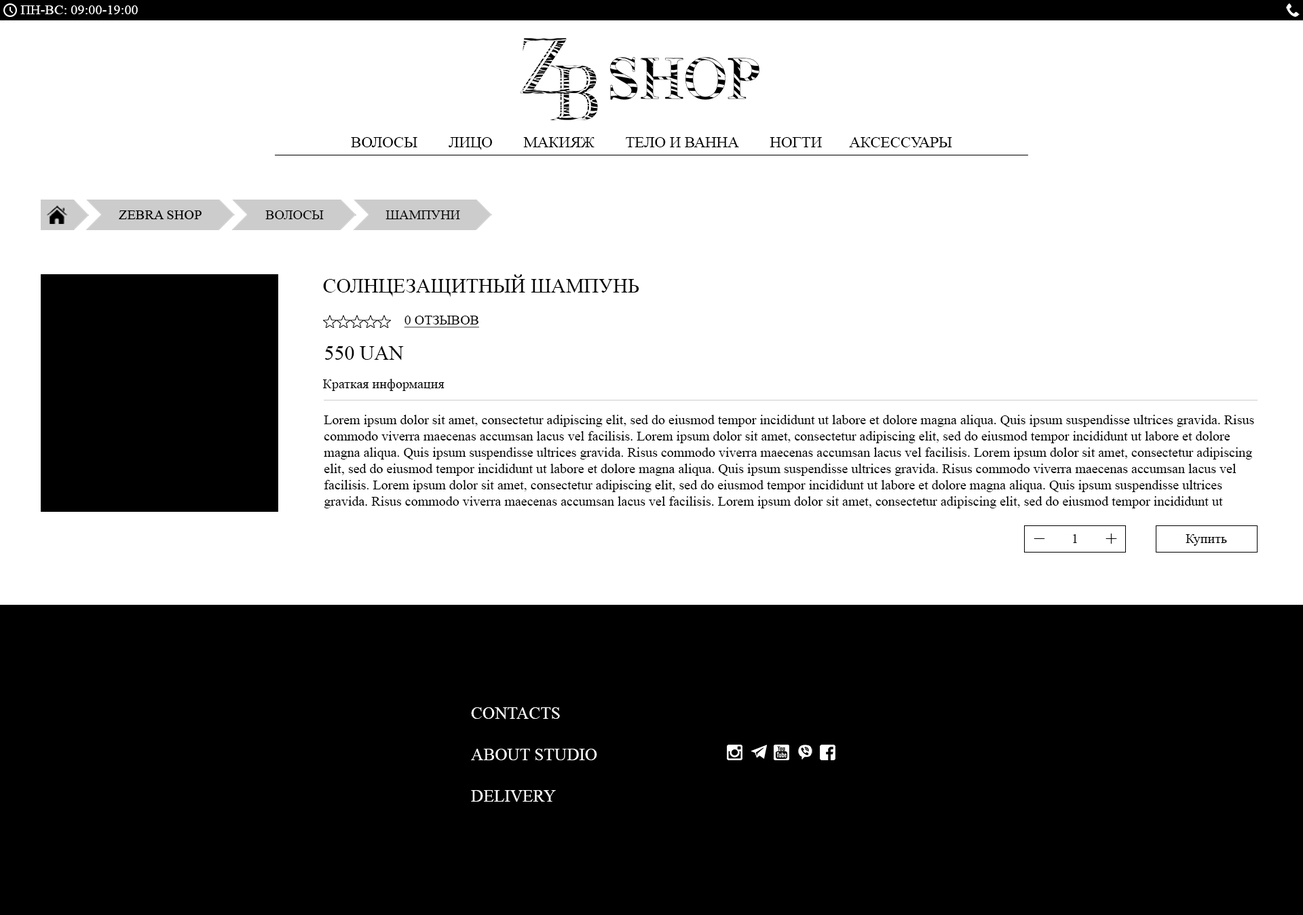
<style>
.page{position:relative;width:1303px;height:915px;background:#ffffff}
.page>*{position:absolute;margin:0}
.t1{font:13.8px "TimesNewRomanPSMT";color:#ffffff}
.t2{font:15.5px "TimesNewRomanPSMT";color:#000000;text-transform:uppercase}
.t3{font:13.6px "TimesNewRomanPSMT";color:#000000;text-transform:uppercase}
.t4{font:20.4px "TimesNewRomanPSMT";color:#000000;text-transform:uppercase}
.t5{font:13.6px "TimesNewRomanPSMT";color:#000000;text-transform:uppercase;text-decoration:underline}
.t6{font:13.6px "TimesNewRomanPSMT";color:#000000}
.t7{font:20.4px "TimesNewRomanPSMT";color:#000000}
.t8{font:17.2px "TimesNewRomanPSMT";color:#ffffff;text-transform:uppercase}
</style>
<div class="page">
<p class="t1" style="left:20px;top:5px;width:118px;height:9px">ПН-ВС: 09:00-19:00</p>
<p class="t2" style="left:351px;top:137px;width:601px;height:13px">волосы        лицо        макияж        Тело и ванна        ногти       аксессуары</p>
<p class="t3" style="left:265px;top:210px;width:59px;height:9px">волосы</p>
<p class="t3" style="left:386px;top:210px;width:74px;height:9px">шампуни</p>
<p class="t4" style="left:323px;top:274px;width:316px;height:23px">солнцезащитный шампунь</p>
<p class="t5" style="left:404px;top:316px;width:75px;height:12px">0 отзывов</p>
<p class="t4" style="left:325px;top:346px;width:79px;height:14px">550 UAN</p>
<p class="t6" style="left:322px;top:379px;width:123px;height:12px">Краткая информация</p>
<p class="t6" style="left:324px;top:415px;width:930px;height:93px">Lorem ipsum dolor sit amet, consectetur adipiscing elit, sed do eiusmod tempor incididunt ut labore et dolore magna aliqua. Quis ipsum suspendisse ultrices gravida. Risus commodo viverra maecenas accumsan lacus vel facilisis. Lorem ipsum dolor sit amet, consectetur adipiscing elit, sed do eiusmod tempor incididunt ut labore et dolore magna aliqua. Quis ipsum suspendisse ultrices gravida. Risus commodo viverra maecenas accumsan lacus vel facilisis. Lorem ipsum dolor sit amet, consectetur adipiscing elit, sed do eiusmod tempor incididunt ut labore et dolore magna aliqua. Quis ipsum suspendisse ultrices gravida. Risus commodo viverra maecenas accumsan lacus vel facilisis. Lorem ipsum dolor sit amet, consectetur adipiscing elit, sed do eiusmod tempor incididunt ut labore et dolore magna aliqua. Quis ipsum suspendisse ultrices gravida. Risus commodo viverra maecenas accumsan lacus vel facilisis. Lorem ipsum dolor sit amet, consectetur adipiscing elit, sed do eiusmod tempor incididunt ut labore et dolore magna aliqua. Quis ipsum suspendisse ultrices gravida. Risus commodo viverra maecenas accumsan lacus vel facilisis.</p>
<p class="t7" style="left:1106px;top:534px;width:11px;height:10px">+</p>
<p class="t7" style="left:1034px;top:538px;width:11px;height:1px">_</p>
<p class="t6" style="left:1073px;top:534px;width:4px;height:9px">1</p>
<p class="t6" style="left:1186px;top:534px;width:41px;height:12px">Купить</p>
<p class="t8" style="left:471px;top:707px;width:126px;height:95px">Contacts<br><br>about studio<br><br>delivery</p>
</div>
